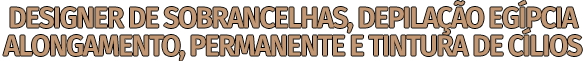
<style>
.page{position:relative;width:587px;height:61px;background:#ffffff}
.page>*{position:absolute;margin:0}
.t1{font:29.1px "FiraSans-SemiBold";letter-spacing:-0.05em;color:#c19873;scale:0.96 1}
</style>
<div class="page">
<p class="t1" style="left:10px;top:0px;width:569px;height:35px">DESIGNER DE SOBRANCELHAS, DEPILAÇÃO EGÍPCIA</p>
<p class="t1" style="left:3px;top:28px;width:579px;height:33px">ALONGAMENTO, PERMANENTE E TINTURA DE CÍLIOS</p>
</div>
